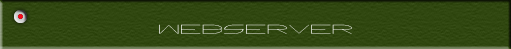
<style>
.page{position:relative;width:511px;height:49px}
.page>*{position:absolute;margin:0}
.t1{font:14px "WorldNet";letter-spacing:0.05em}
</style>
<div class="page">
<p class="t1" style="left:159px;top:24px;width:193px;height:10px">webserver</p>
</div>
